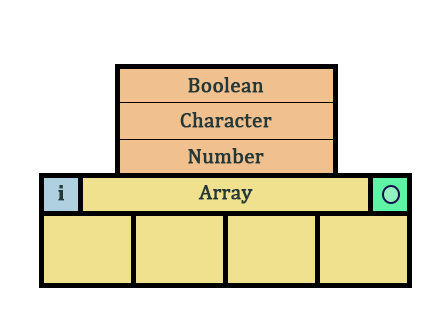
<style>
.page{position:relative;width:445px;height:331px;background:#ffffff}
.page>*{position:absolute;margin:0}
.t1{font:20.8px "Cambria";color:#233939;font-weight:bold}
.t2{font:20.8px "Cambria-Bold";color:#233939;font-weight:bold}
</style>
<div class="page">
<p class="t1" style="left:188px;top:77px;width:76px;height:16px">Boolean</p>
<p class="t1" style="left:180px;top:112px;width:92px;height:16px">Character</p>
<p class="t1" style="left:188px;top:148px;width:76px;height:16px">Number</p>
<p class="t2" style="left:58px;top:185px;width:6px;height:16px">i</p>
<p class="t1" style="left:198px;top:185px;width:55px;height:19px">Array</p>
</div>
